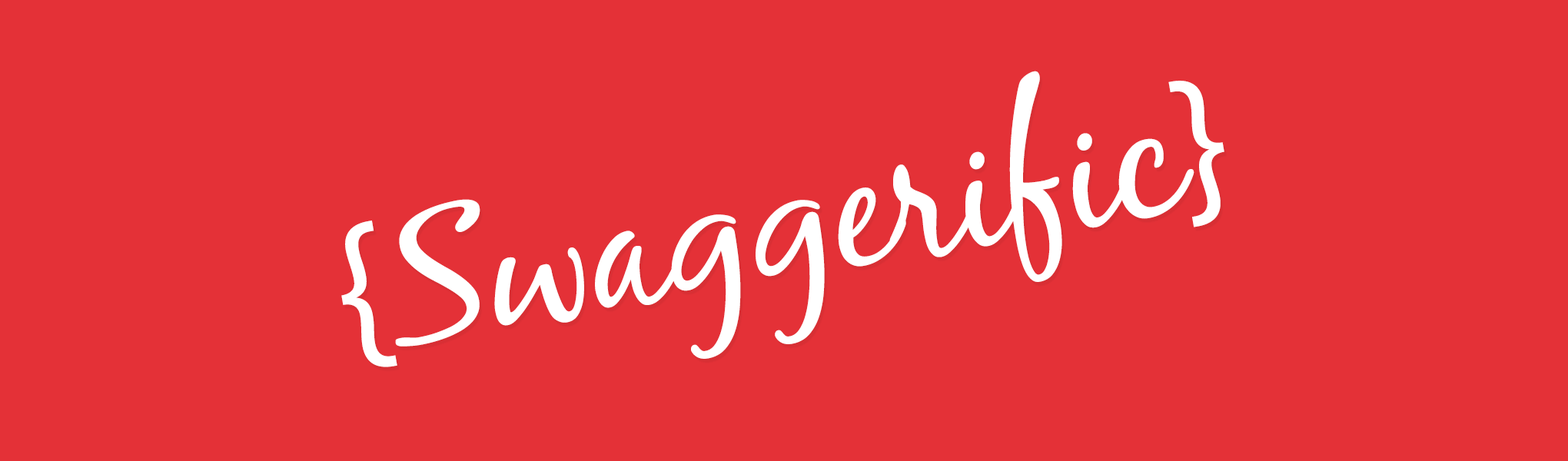
<style>
.page{position:relative;width:1568px;height:461px;background:#e43137}
.page>*{position:absolute;margin:0}
.t1{font:184.5px "BlackJackRegular";letter-spacing:-0.01em;color:#ffffff}
.t2{font:184.5px "MyriadPro-Regular";letter-spacing:-0.01em;color:#ffffff}
</style>
<div class="page">
<p class="t1" style="left:341px;top:71px;width:883px;height:296px;rotate:-10deg"><span class="t2">{</span>Swaggerific<span class="t2">}</span></p>
</div>
